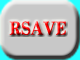
<style>
.page{position:relative;width:80px;height:60px;background:#c8c8c8}
.page>*{position:absolute;margin:0}
.t1{font:18px "MyungjoXB-HM"}
</style>
<div class="page">
<p class="t1" style="left:9px;top:21px;width:57px;height:14px">RSAVE</p>
</div>
